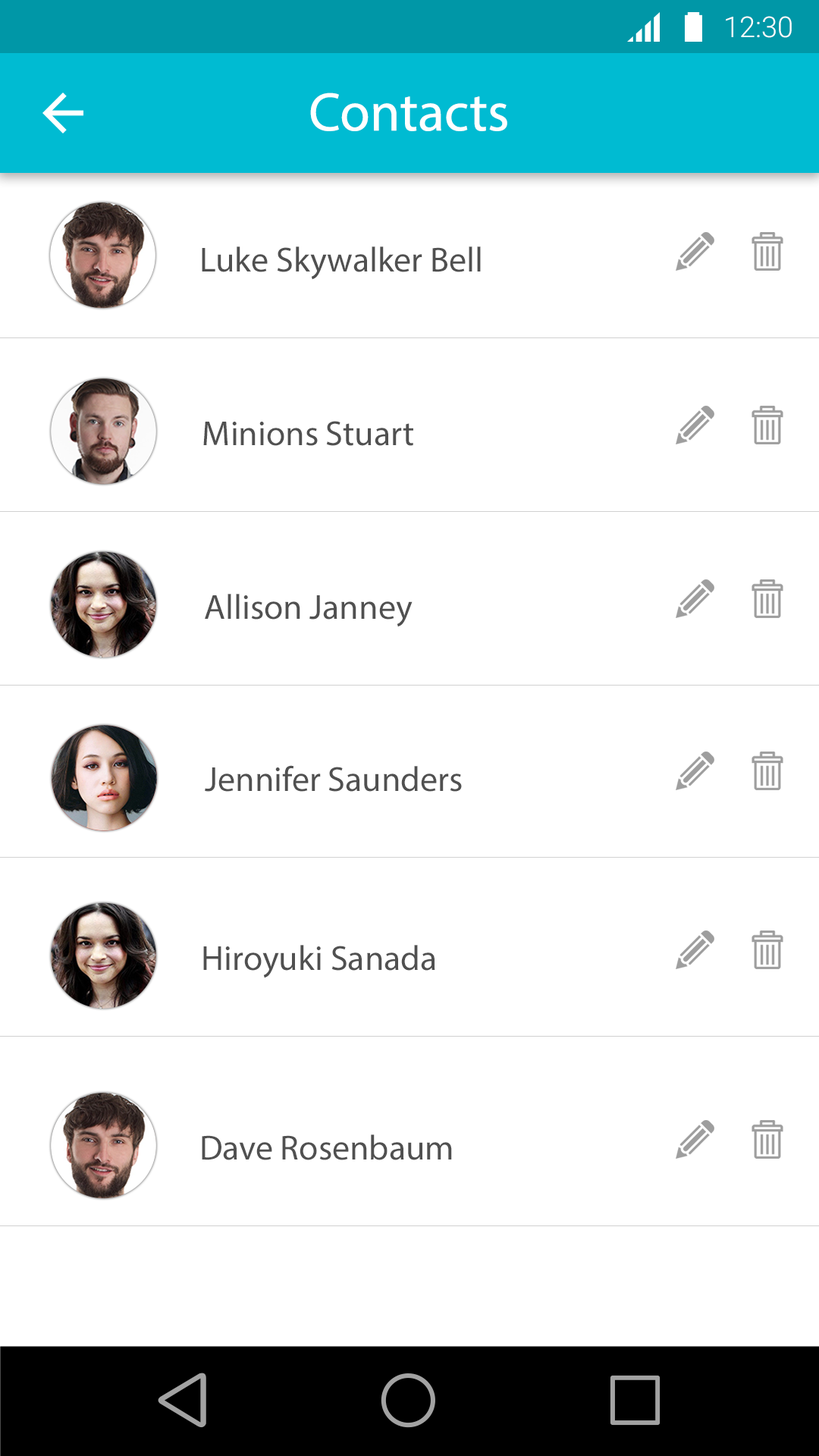
<style>
.page{position:relative;width:819px;height:1456px;background:#ffffff}
.page>*{position:absolute;margin:0}
.t1{font:28.8px "Roboto-Light";color:#ffffff}
.t2{font:54.6px "MyriadPro-Regular";color:#ffffff}
.t3{font:34.9px "MyriadPro-Regular";color:#505050}
</style>
<div class="page">
<p class="t1" style="left:726px;top:16px;width:66px;height:22px">12:30</p>
<p class="t2" style="left:310px;top:93px;width:197px;height:38px">Contacts</p>
<p class="t3" style="left:202px;top:246px;width:279px;height:34px">Luke Skywalker Bell</p>
<p class="t3" style="left:203px;top:421px;width:210px;height:25px">Minions Stuart</p>
<p class="t3" style="left:205px;top:594px;width:208px;height:33px">Allison Janney</p>
<p class="t3" style="left:205px;top:765px;width:257px;height:27px">Jennifer Saunders</p>
<p class="t3" style="left:203px;top:945px;width:232px;height:33px">Hiroyuki Sanada</p>
<p class="t3" style="left:202px;top:1134px;width:250px;height:26px">Dave Rosenbaum</p>
</div>
